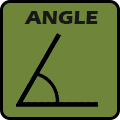
<style>
.page{position:relative;width:120px;height:120px;background:#6f853a}
.page>*{position:absolute;margin:0}
.t1{font:20px "ErasITC-Bold";color:#181818}
</style>
<div class="page">
<p class="t1" style="left:24px;top:11px;width:74px;height:13px">ANGLE</p>
</div>
